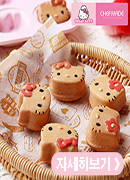
<style>
.page{position:relative;width:130px;height:180px}
.page>*{position:absolute;margin:0}
.t1{font:14.6px "H2gtrE";color:#fafafa;scale:0.76 1}
</style>
<div class="page">
<p class="t1" style="left:56px;top:157px;width:54px;height:14px">자세히보기</p>
</div>
